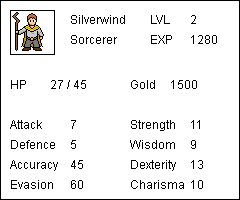
<style>
.page{position:relative;width:240px;height:200px;background:#ffffff}
.page>*{position:absolute;margin:0}
.t1{font:12px "ArialMT";color:#000000}
</style>
<div class="page">
<p class="t1" style="left:71px;top:15px;width:54px;height:9px">Silverwind</p>
<p class="t1" style="left:151px;top:15px;width:19px;height:9px">LVL</p>
<p class="t1" style="left:191px;top:15px;width:5px;height:9px">2</p>
<p class="t1" style="left:71px;top:35px;width:46px;height:9px">Sorcerer</p>
<p class="t1" style="left:151px;top:35px;width:21px;height:9px">EXP</p>
<p class="t1" style="left:191px;top:35px;width:26px;height:9px">1280</p>
<p class="t1" style="left:11px;top:80px;width:15px;height:9px">HP</p>
<p class="t1" style="left:51px;top:80px;width:35px;height:9px">27 / 45</p>
<p class="t1" style="left:131px;top:80px;width:24px;height:9px">Gold</p>
<p class="t1" style="left:171px;top:80px;width:26px;height:9px">1500</p>
<p class="t1" style="left:10px;top:120px;width:32px;height:9px">Attack</p>
<p class="t1" style="left:71px;top:120px;width:5px;height:9px">7</p>
<p class="t1" style="left:131px;top:120px;width:44px;height:11px">Strength</p>
<p class="t1" style="left:191px;top:120px;width:9px;height:9px">11</p>
<p class="t1" style="left:11px;top:140px;width:44px;height:9px">Defence</p>
<p class="t1" style="left:71px;top:140px;width:5px;height:9px">5</p>
<p class="t1" style="left:130px;top:140px;width:45px;height:9px">Wisdom</p>
<p class="t1" style="left:191px;top:140px;width:5px;height:9px">9</p>
<p class="t1" style="left:10px;top:160px;width:48px;height:11px">Accuracy</p>
<p class="t1" style="left:71px;top:160px;width:12px;height:9px">45</p>
<p class="t1" style="left:131px;top:160px;width:45px;height:11px">Dexterity</p>
<p class="t1" style="left:191px;top:160px;width:12px;height:9px">13</p>
<p class="t1" style="left:11px;top:180px;width:42px;height:9px">Evasion</p>
<p class="t1" style="left:71px;top:180px;width:12px;height:9px">60</p>
<p class="t1" style="left:131px;top:180px;width:53px;height:9px">Charisma</p>
<p class="t1" style="left:191px;top:180px;width:12px;height:9px">10</p>
</div>
